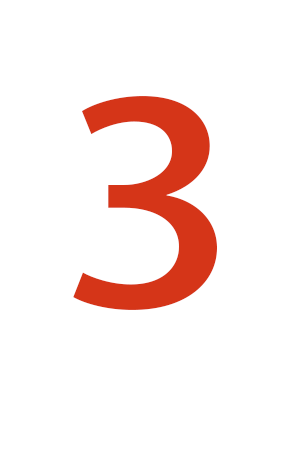
<style>
.page{position:relative;width:300px;height:450px;background:#ffffff}
.page>*{position:absolute;margin:0}
.t1{font:275.2px "AdobeFanHeitiStd-Bold";color:#d53518;scale:1.16 1}
</style>
<div class="page">
<p class="t1" style="left:73px;top:96px;width:144px;height:214px">3</p>
</div>
